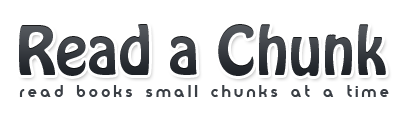
<style>
.page{position:relative;width:402px;height:113px;background:#ffffff}
.page>*{position:absolute;margin:0}
.t1{font:60px "HoboStd";color:#252a31}
.t2{font:15px "Moderna";letter-spacing:0.22em;color:#252a31}
</style>
<div class="page">
<p class="t1" style="left:19px;top:24px;width:367px;height:52px">Read a Chunk</p>
<p class="t2" style="left:19px;top:85px;width:370px;height:12px;opacity:0.9">read books small chunks at a time</p>
</div>
